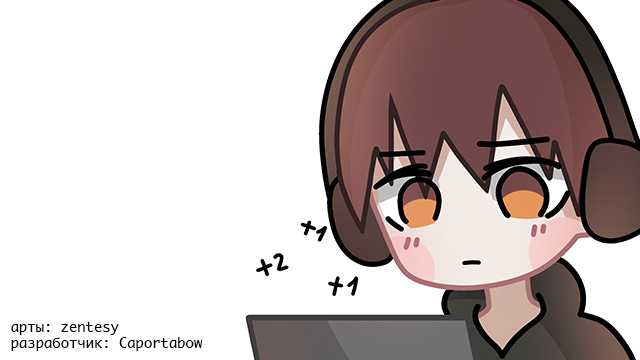
<style>
.page{position:relative;width:640px;height:360px;background:#ffffff}
.page>*{position:absolute;margin:0}
.t1{font:13.9px "Ayuthaya";color:#000000}
</style>
<div class="page">
<p class="t1" style="left:11px;top:322px;width:192px;height:29px">арты: zentesy<br>разработчик: Caportabow</p>
</div>
